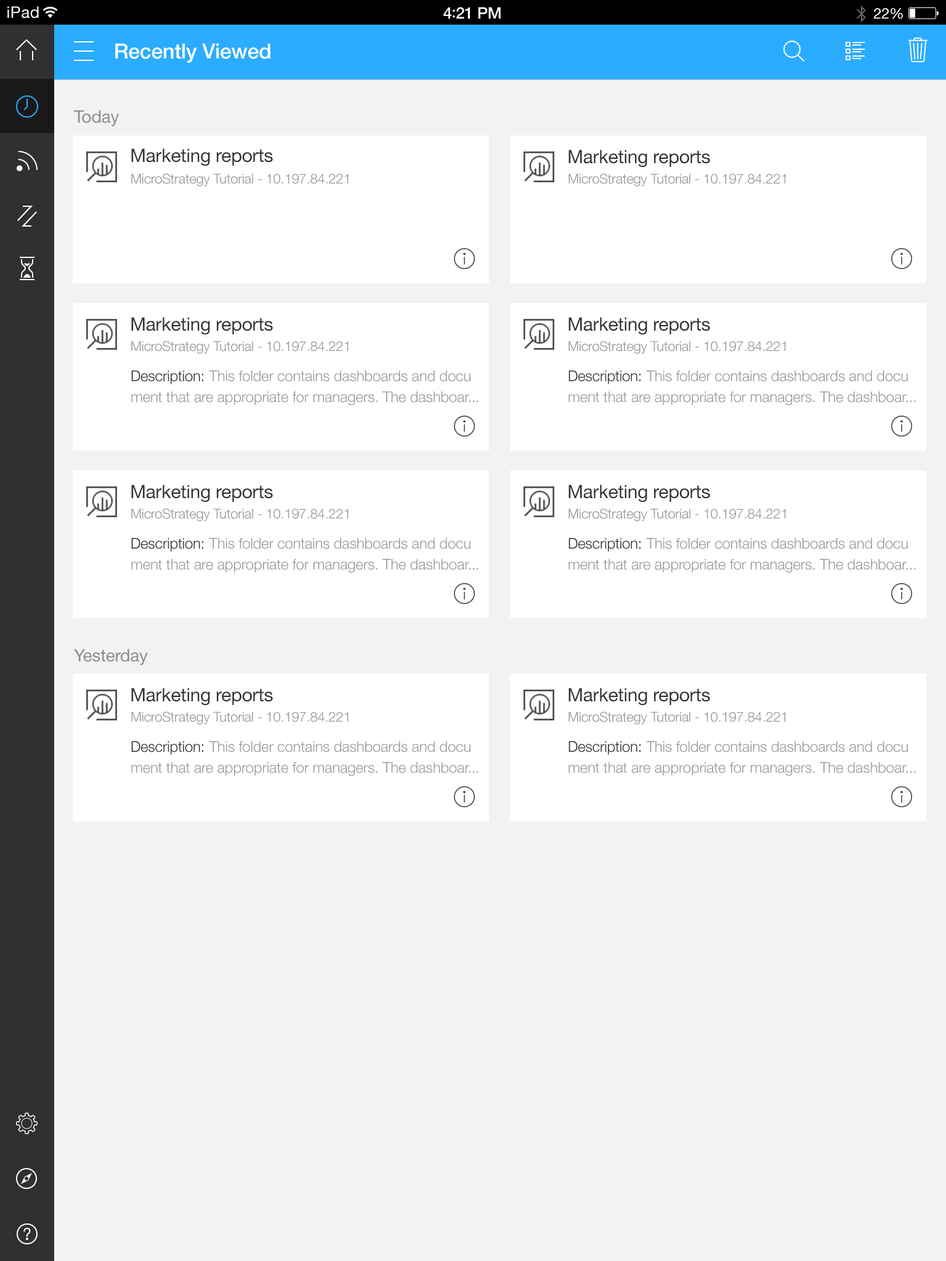
<style>
.page{position:relative;width:946px;height:1261px;background:#f2f2f2}
.page>*{position:absolute;margin:0}
.t1{font:16px "HelveticaNeue";letter-spacing:0.02em;color:#ffffff}
.t2{font:16px "HelveticaNeue-Medium";letter-spacing:-0.02em;color:#ffffff}
.t3{font:16px "Avenir-Medium";letter-spacing:-0.02em;color:#ffffff}
.t4{font:14.8px "HelveticaNeue";letter-spacing:-0.02em;color:#ffffff}
.t5{font:20.9px "HelveticaNeue-Medium";letter-spacing:-0.01em;color:#ffffff}
.t6{font:17.2px "HelveticaNeue";letter-spacing:-0.01em;color:#8c8c8c}
.t7{font:18.5px "HelveticaNeue";letter-spacing:-0.01em;color:#333333}
.t8{font:13.5px "HelveticaNeue-Light";letter-spacing:-0.01em;color:#999999}
.t9{font:14.8px/20.9px "HelveticaNeue-Light";letter-spacing:-0.01em;color:#999999}
.t10{font:14.8px/20.9px "HelveticaNeue-Light";letter-spacing:-0.01em;color:#333333}
</style>
<div class="page">
<p class="t1" style="left:7px;top:6px;width:32px;height:12px">iPad</p>
<p class="t2" style="left:443px;top:7px;width:58px;height:12px">4<span class="t3">:</span>21 PM</p>
<p class="t4" style="left:873px;top:8px;width:30px;height:11px">22%</p>
<p class="t5" style="left:115px;top:43px;width:155px;height:20px">Recently Viewed</p>
<p class="t6" style="left:74px;top:110px;width:45px;height:16px">Today</p>
<p class="t7" style="left:131px;top:148px;width:142px;height:18px">Marketing reports</p>
<p class="t7" style="left:568px;top:150px;width:142px;height:17px">Marketing reports</p>
<p class="t8" style="left:131px;top:174px;width:217px;height:13px">MicroStrategy Tutorial - 10.197.84.221</p>
<p class="t8" style="left:568px;top:174px;width:218px;height:13px">MicroStrategy Tutorial - 10.197.84.221</p>
<p class="t7" style="left:131px;top:317px;width:142px;height:18px">Marketing reports</p>
<p class="t7" style="left:568px;top:317px;width:142px;height:18px">Marketing reports</p>
<p class="t8" style="left:131px;top:341px;width:217px;height:13px">MicroStrategy Tutorial - 10.197.84.221</p>
<p class="t8" style="left:568px;top:341px;width:218px;height:13px">MicroStrategy Tutorial - 10.197.84.221</p>
<p class="t9" style="left:131px;top:370px;width:347px;height:35px"><span class="t10">Description: </span>This folder contains dashboards and docu<br>ment that are appropriate for managers. The dashboar...</p>
<p class="t9" style="left:568px;top:370px;width:348px;height:35px"><span class="t10">Description: </span>This folder contains dashboards and docu<br>ment that are appropriate for managers. The dashboar...</p>
<p class="t7" style="left:131px;top:485px;width:142px;height:17px">Marketing reports</p>
<p class="t7" style="left:568px;top:485px;width:142px;height:17px">Marketing reports</p>
<p class="t8" style="left:131px;top:509px;width:217px;height:12px">MicroStrategy Tutorial - 10.197.84.221</p>
<p class="t8" style="left:568px;top:509px;width:218px;height:12px">MicroStrategy Tutorial - 10.197.84.221</p>
<p class="t9" style="left:131px;top:537px;width:347px;height:36px"><span class="t10">Description: </span>This folder contains dashboards and docu<br>ment that are appropriate for managers. The dashboar...</p>
<p class="t9" style="left:568px;top:537px;width:348px;height:36px"><span class="t10">Description: </span>This folder contains dashboards and docu<br>ment that are appropriate for managers. The dashboar...</p>
<p class="t6" style="left:74px;top:649px;width:74px;height:16px">Yesterday</p>
<p class="t7" style="left:131px;top:688px;width:142px;height:18px">Marketing reports</p>
<p class="t7" style="left:568px;top:688px;width:142px;height:18px">Marketing reports</p>
<p class="t8" style="left:131px;top:712px;width:217px;height:13px">MicroStrategy Tutorial - 10.197.84.221</p>
<p class="t8" style="left:568px;top:712px;width:218px;height:13px">MicroStrategy Tutorial - 10.197.84.221</p>
<p class="t9" style="left:131px;top:741px;width:347px;height:35px"><span class="t10">Description: </span>This folder contains dashboards and docu<br>ment that are appropriate for managers. The dashboar...</p>
<p class="t9" style="left:568px;top:741px;width:348px;height:35px"><span class="t10">Description: </span>This folder contains dashboards and docu<br>ment that are appropriate for managers. The dashboar...</p>
</div>
